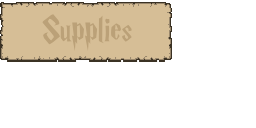
<style>
.page{position:relative;width:256px;height:128px;background:#ffffff}
.page>*{position:absolute;margin:0}
.t1{font:39px "HarryP";color:#bba178}
</style>
<div class="page">
<p class="t1" style="left:42px;top:14px;width:90px;height:38px">Supplies</p>
</div>
